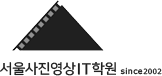
<style>
.page{position:relative;width:162px;height:76px;background:#ffffff}
.page>*{position:absolute;margin:0}
.t1{font:13.8px "NanumSquareB";letter-spacing:-0.035em;color:#202020;scale:1.05 1}
.t2{font:13.8px "NanumSquareB";letter-spacing:0.065em;color:#202020;scale:1.05 1}
.t3{font:15.4px "NanumSquareB";letter-spacing:0.045em;color:#202020;scale:1.05 1}
.t4{font:15.4px "NanumSquareB";letter-spacing:0.025em;color:#202020;scale:1.05 1}
.t5{font:8px "Verdana";letter-spacing:0.085em;color:#202020}
.t6{font:8px "Verdana";letter-spacing:0.045em;color:#202020}
.t7{font:8px "Verdana";letter-spacing:0.065em;color:#202020}
.t8{font:7px "Verdana";letter-spacing:0.025em;color:#202020}
.t9{font:7px "Verdana";letter-spacing:0.005em;color:#202020;scale:1.05 1}
.t10{font:7px "Verdana";letter-spacing:-0.075em;color:#202020}
</style>
<div class="page">
<p class="t1" style="left:0px;top:62px;width:162px;height:14px">서울사진영<span class="t2">상</span><span class="t3">I</span><span class="t4">T</span>학원 <span class="t5">s</span><span class="t6">in</span><span class="t7">c</span><span class="t5">e</span><span class="t8">2</span><span class="t9">00</span><span class="t10">2</span></p>
</div>
